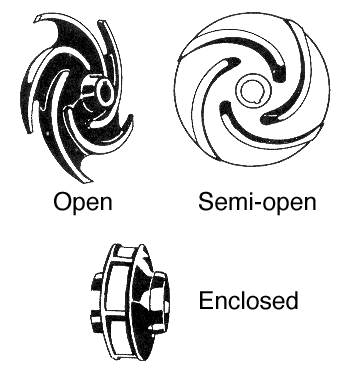
<style>
.page{position:relative;width:349px;height:376px;background:#ffffff}
.page>*{position:absolute;margin:0}
.t1{font:24.7px "Helvetica";color:#000000}
</style>
<div class="page">
<p class="t1" style="left:54px;top:191px;width:58px;height:25px">Open</p>
<p class="t1" style="left:199px;top:191px;width:117px;height:25px">Semi-open</p>
<p class="t1" style="left:200px;top:291px;width:98px;height:19px">Enclosed</p>
</div>
